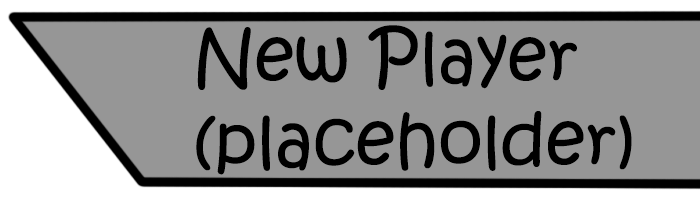
<style>
.page{position:relative;width:700px;height:200px;background:#969696}
.page>*{position:absolute;margin:0}
.t1{font:70px "KristenITC-Regular";color:#000000}
</style>
<div class="page">
<p class="t1" style="left:196px;top:25px;width:436px;height:150px">New Player<br>(placeholder)</p>
</div>
